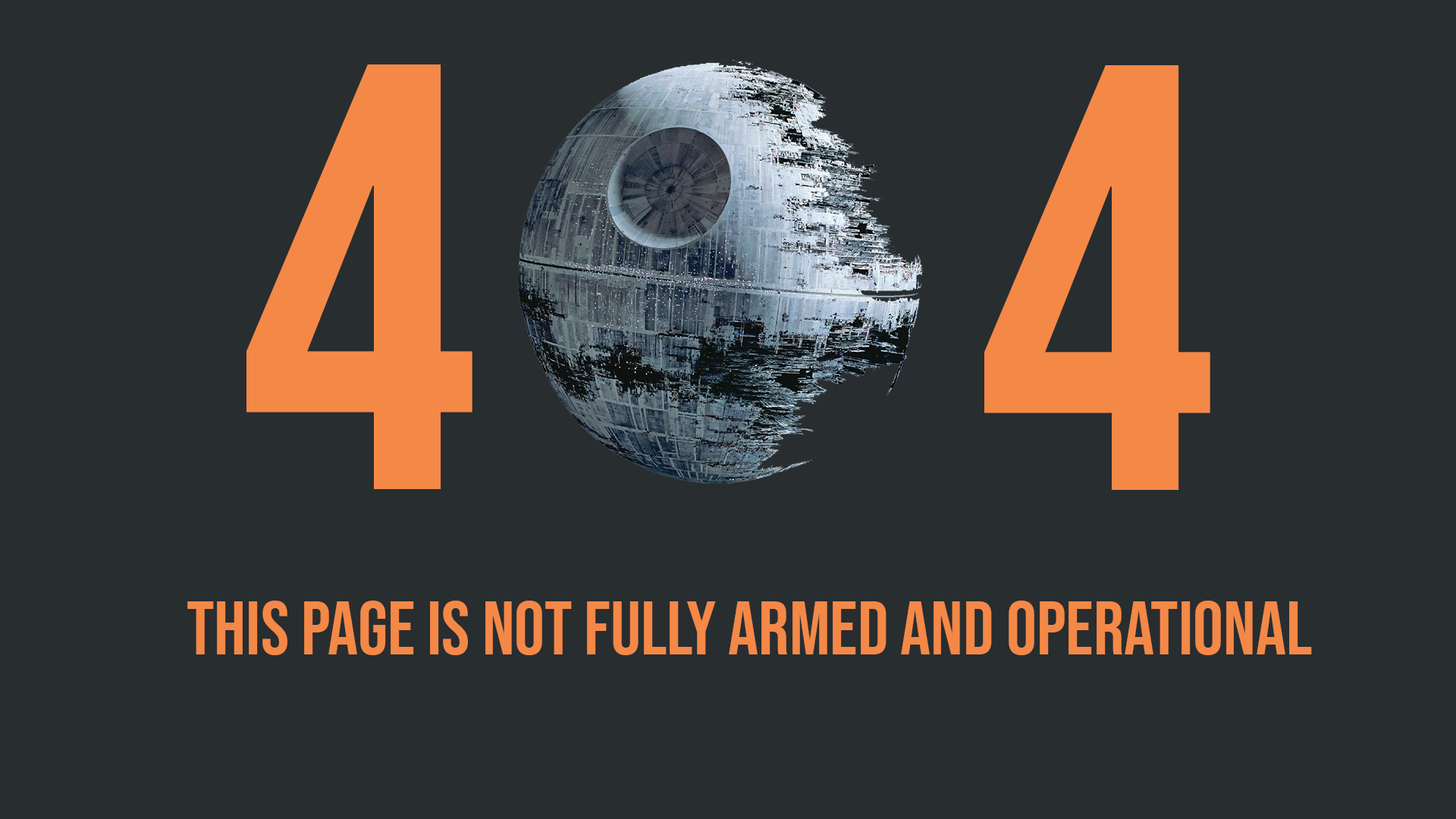
<style>
.page{position:relative;width:1456px;height:819px;background:#282d30}
.page>*{position:absolute;margin:0}
.t1{font:606.7px "BebasNeue-Regular";color:#f48847}
.t2{font:75.8px "BebasNeue-Regular";color:#f48847}
</style>
<div class="page">
<p class="t1" style="left:246px;top:64px;width:226px;height:425px">4</p>
<p class="t1" style="left:984px;top:65px;width:226px;height:425px">4</p>
<p class="t2" style="left:187px;top:601px;width:1125px;height:54px">This page is not fully armed and operational</p>
</div>
